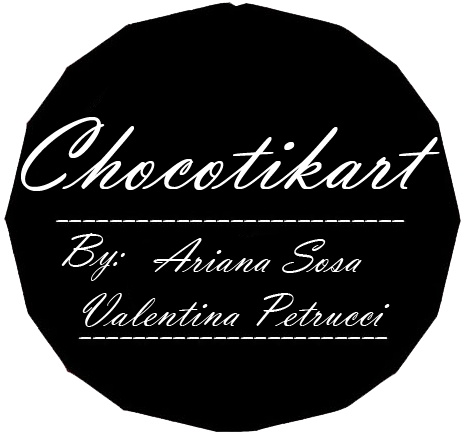
<style>
.page{position:relative;width:470px;height:435px;background:#000000}
.page>*{position:absolute;margin:0}
.t1{font:105px "VladimirScript";color:#ffffff}
.t2{font:48px "VladimirScript";color:#ffffff}
</style>
<div class="page">
<p class="t1" style="left:21px;top:117px;width:419px;height:74px">Chocotikart</p>
<p class="t2" style="left:61px;top:233px;width:64px;height:48px">By:</p>
<p class="t2" style="left:153px;top:238px;width:209px;height:35px">Ariana Sosa</p>
<p class="t2" style="left:82px;top:293px;width:308px;height:34px">Valentina Petrucci</p>
</div>
